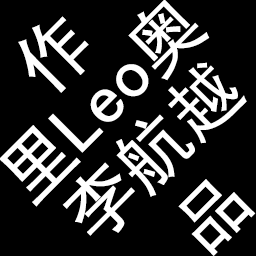
<style>
.page{position:relative;width:256px;height:256px;background:#000000}
.page>*{position:absolute;margin:0}
.t1{font:72px "SimHei";color:#ffffff}
.t2{font:72px/75px "SimHei";color:#ffffff}
</style>
<div class="page">
<p class="t1" style="left:0px;top:0px;width:210px;height:207px;rotate:-45deg">里Leo奥</p>
<p class="t2" style="left:18px;top:16px;width:238px;height:240px;text-align:center;rotate:-45deg">作<br><br><br>品</p>
<p class="t1" style="left:62px;top:62px;width:185px;height:174px;rotate:-45deg">李航越</p>
</div>
